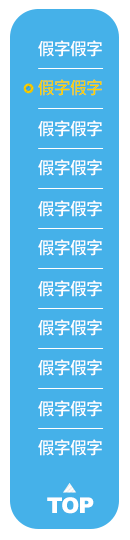
<style>
.page{position:relative;width:130px;height:540px;background:#45b1e9}
.page>*{position:absolute;margin:0}
.t1{font:17px "SourceHanSansTW-Medium";letter-spacing:-0.05em;color:#ffffff}
.t2{font:17px "SourceHanSansTW-Medium";letter-spacing:-0.05em;color:#fdd000}
.t3{font:21.8px "Arial-Black";letter-spacing:-0.05em;color:#ffffff}
</style>
<div class="page">
<p class="t1" style="left:38px;top:40px;width:64px;height:17px">假字假字</p>
<p class="t2" style="left:38px;top:79px;width:64px;height:17px">假字假字</p>
<p class="t1" style="left:38px;top:120px;width:64px;height:17px">假字假字</p>
<p class="t1" style="left:38px;top:159px;width:64px;height:17px">假字假字</p>
<p class="t1" style="left:38px;top:200px;width:64px;height:17px">假字假字</p>
<p class="t1" style="left:38px;top:239px;width:64px;height:17px">假字假字</p>
<p class="t1" style="left:38px;top:280px;width:64px;height:17px">假字假字</p>
<p class="t1" style="left:38px;top:319px;width:64px;height:17px">假字假字</p>
<p class="t1" style="left:38px;top:359px;width:64px;height:17px">假字假字</p>
<p class="t1" style="left:38px;top:400px;width:64px;height:17px">假字假字</p>
<p class="t1" style="left:38px;top:439px;width:64px;height:17px">假字假字</p>
<p class="t3" style="left:47px;top:497px;width:47px;height:17px">TOP</p>
</div>
